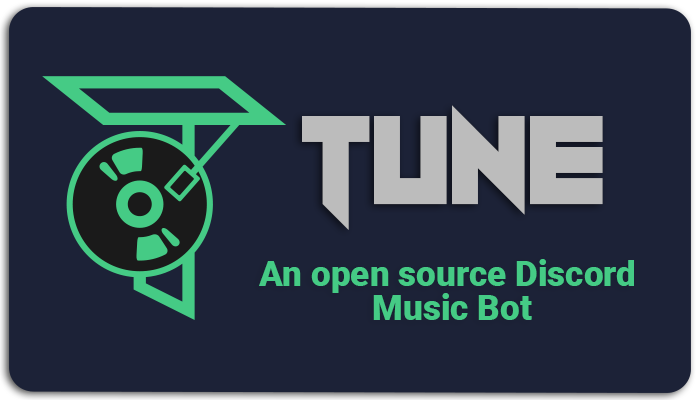
<style>
.page{position:relative;width:700px;height:400px;background:#1c2237}
.page>*{position:absolute;margin:0}
.t1{font:106px "SheepingCatsStraight";color:#bcbcbc}
.t2{font:35.2px/33.4px "Roboto-Black";color:#45cb85}
</style>
<div class="page">
<p class="t1" style="left:302px;top:105px;width:301px;height:125px">Tune</p>
<p class="t2" style="left:259px;top:259px;width:375px;height:61px;text-align:center">An open source Discord <br>Music Bot</p>
</div>
